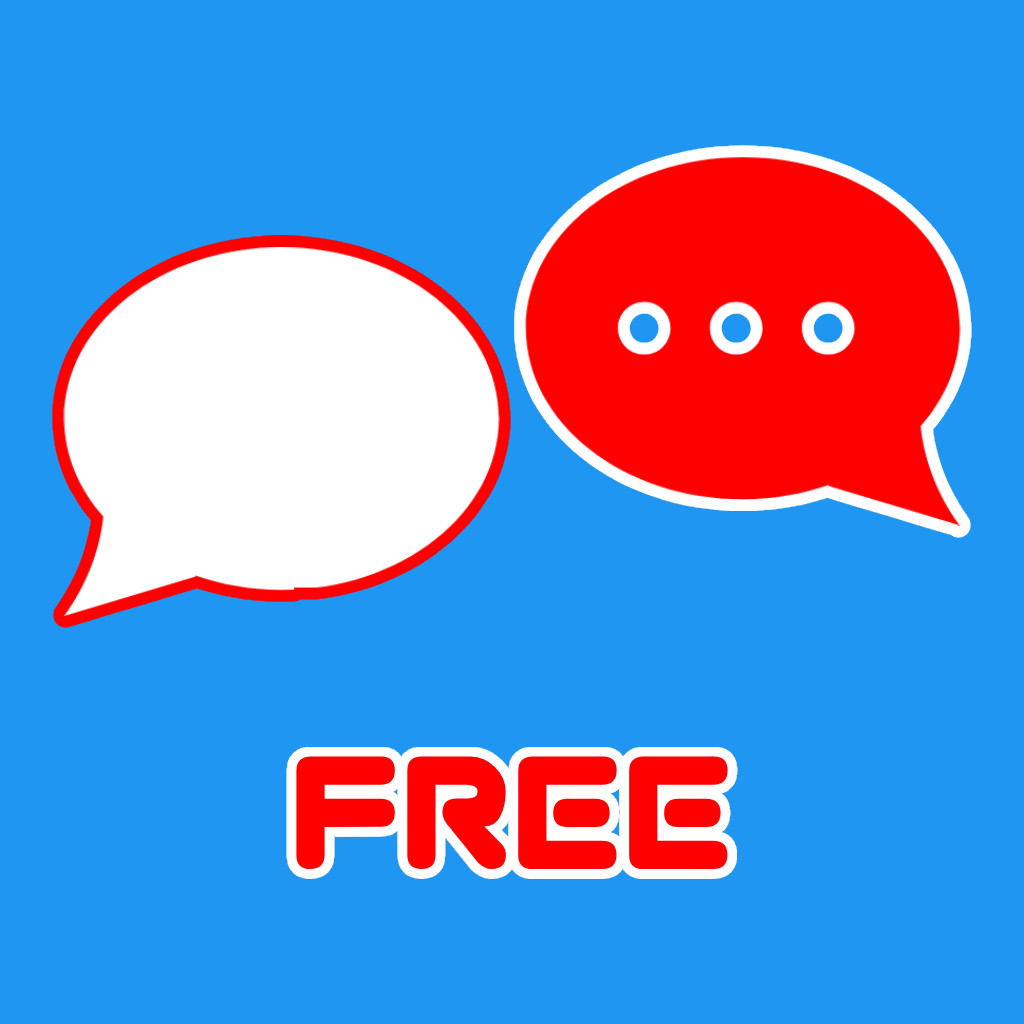
<style>
.page{position:relative;width:1024px;height:1024px;background:#2096f3}
.page>*{position:absolute;margin:0}
.t1{font:180px "Virgo01";color:#ff0000}
</style>
<div class="page">
<p class="t1" style="left:296px;top:756px;width:432px;height:113px">Free</p>
</div>
